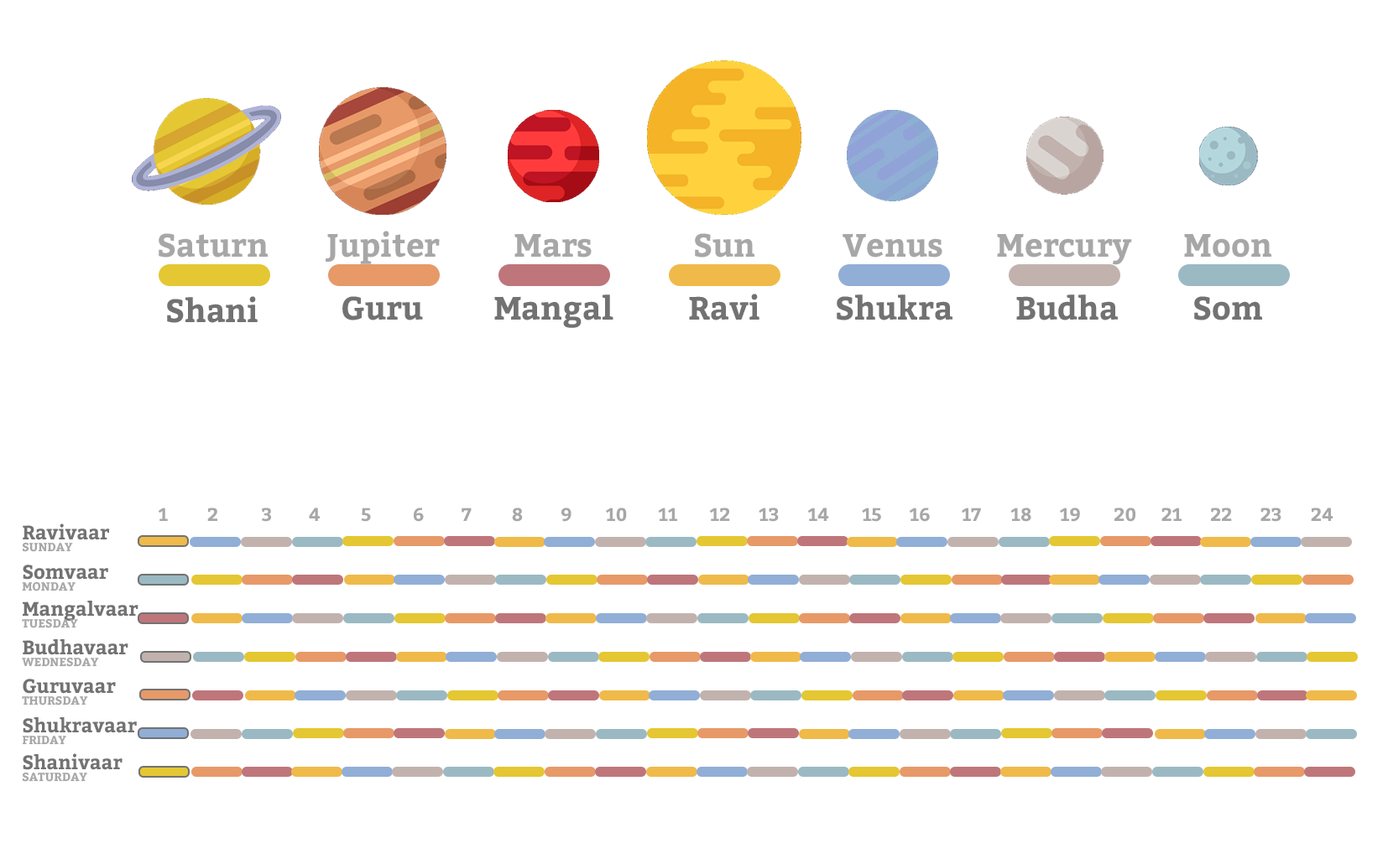
<style>
.page{position:relative;width:1388px;height:859px;background:#ffffff}
.page>*{position:absolute;margin:0}
.t1{font:32.3px "Bitter-Bold";color:#a7a7a7}
.t2{font:32.3px "Bitter-Bold";color:#727272}
.t3{font:18.2px "Bitter-Bold";color:#a7a7a7}
.t4{font:19.4px "Bitter-Bold";color:#727272}
.t5{font:11.7px "Bitter-Bold";color:#a7a7a7}
</style>
<div class="page">
<p class="t1" style="left:159px;top:233px;width:109px;height:25px">Saturn</p>
<p class="t1" style="left:325px;top:231px;width:115px;height:33px">Jupiter</p>
<p class="t1" style="left:514px;top:233px;width:78px;height:25px">Mars</p>
<p class="t1" style="left:695px;top:233px;width:59px;height:25px">Sun</p>
<p class="t1" style="left:842px;top:233px;width:100px;height:25px">Venus</p>
<p class="t1" style="left:997px;top:233px;width:135px;height:32px">Mercury</p>
<p class="t1" style="left:1184px;top:233px;width:87px;height:25px">Moon</p>
<p class="t2" style="left:689px;top:294px;width:70px;height:27px">Ravi</p>
<p class="t2" style="left:167px;top:296px;width:91px;height:27px">Shani</p>
<p class="t2" style="left:342px;top:296px;width:81px;height:25px">Guru</p>
<p class="t2" style="left:494px;top:295px;width:119px;height:33px">Mangal</p>
<p class="t2" style="left:837px;top:295px;width:115px;height:26px">Shukra</p>
<p class="t2" style="left:1016px;top:295px;width:102px;height:26px">Budha</p>
<p class="t2" style="left:1194px;top:296px;width:68px;height:25px">Som</p>
<p class="t3" style="left:158px;top:508px;width:10px;height:13px">1</p>
<p class="t3" style="left:207px;top:508px;width:10px;height:13px">2</p>
<p class="t3" style="left:262px;top:508px;width:9px;height:14px">3</p>
<p class="t3" style="left:309px;top:508px;width:11px;height:13px">4</p>
<p class="t3" style="left:361px;top:508px;width:10px;height:14px">5</p>
<p class="t3" style="left:414px;top:508px;width:10px;height:14px">6</p>
<p class="t3" style="left:461px;top:508px;width:11px;height:13px">7</p>
<p class="t3" style="left:512px;top:508px;width:11px;height:14px">8</p>
<p class="t3" style="left:561px;top:508px;width:10px;height:14px">9</p>
<p class="t3" style="left:606px;top:508px;width:21px;height:14px">10</p>
<p class="t3" style="left:658px;top:508px;width:19px;height:13px">11</p>
<p class="t3" style="left:709px;top:508px;width:21px;height:13px">12</p>
<p class="t3" style="left:759px;top:508px;width:20px;height:14px">13</p>
<p class="t3" style="left:807px;top:508px;width:22px;height:13px">14</p>
<p class="t3" style="left:862px;top:508px;width:19px;height:14px">15</p>
<p class="t3" style="left:909px;top:508px;width:21px;height:14px">16</p>
<p class="t3" style="left:962px;top:508px;width:19px;height:13px">17</p>
<p class="t3" style="left:1010px;top:508px;width:21px;height:14px">18</p>
<p class="t3" style="left:1060px;top:508px;width:20px;height:14px">19</p>
<p class="t3" style="left:1114px;top:508px;width:21px;height:14px">20</p>
<p class="t3" style="left:1161px;top:508px;width:20px;height:13px">21</p>
<p class="t3" style="left:1211px;top:508px;width:21px;height:13px">22</p>
<p class="t3" style="left:1260px;top:508px;width:21px;height:14px">23</p>
<p class="t3" style="left:1311px;top:508px;width:22px;height:13px">24</p>
<p class="t4" style="left:23px;top:524px;width:87px;height:16px">Ravivaar</p>
<p class="t5" style="left:22px;top:542px;width:51px;height:10px">SUNDAY</p>
<p class="t4" style="left:23px;top:565px;width:85px;height:15px">Somvaar</p>
<p class="t5" style="left:22px;top:581px;width:54px;height:11px">MONDAY</p>
<p class="t4" style="left:23px;top:601px;width:115px;height:20px">Mangalvaar</p>
<p class="t5" style="left:22px;top:618px;width:56px;height:10px">TUESDAY</p>
<p class="t4" style="left:23px;top:639px;width:105px;height:16px">Budhavaar</p>
<p class="t5" style="left:22px;top:657px;width:77px;height:10px">WEDNESDAY</p>
<p class="t4" style="left:23px;top:679px;width:93px;height:15px">Guruvaar</p>
<p class="t5" style="left:22px;top:696px;width:66px;height:10px">THURSDAY</p>
<p class="t4" style="left:23px;top:717px;width:114px;height:16px">Shukravaar</p>
<p class="t5" style="left:22px;top:736px;width:44px;height:9px">FRIDAY</p>
<p class="t4" style="left:23px;top:753px;width:100px;height:17px">Shanivaar</p>
<p class="t5" style="left:22px;top:772px;width:65px;height:10px">SATURDAY</p>
</div>
